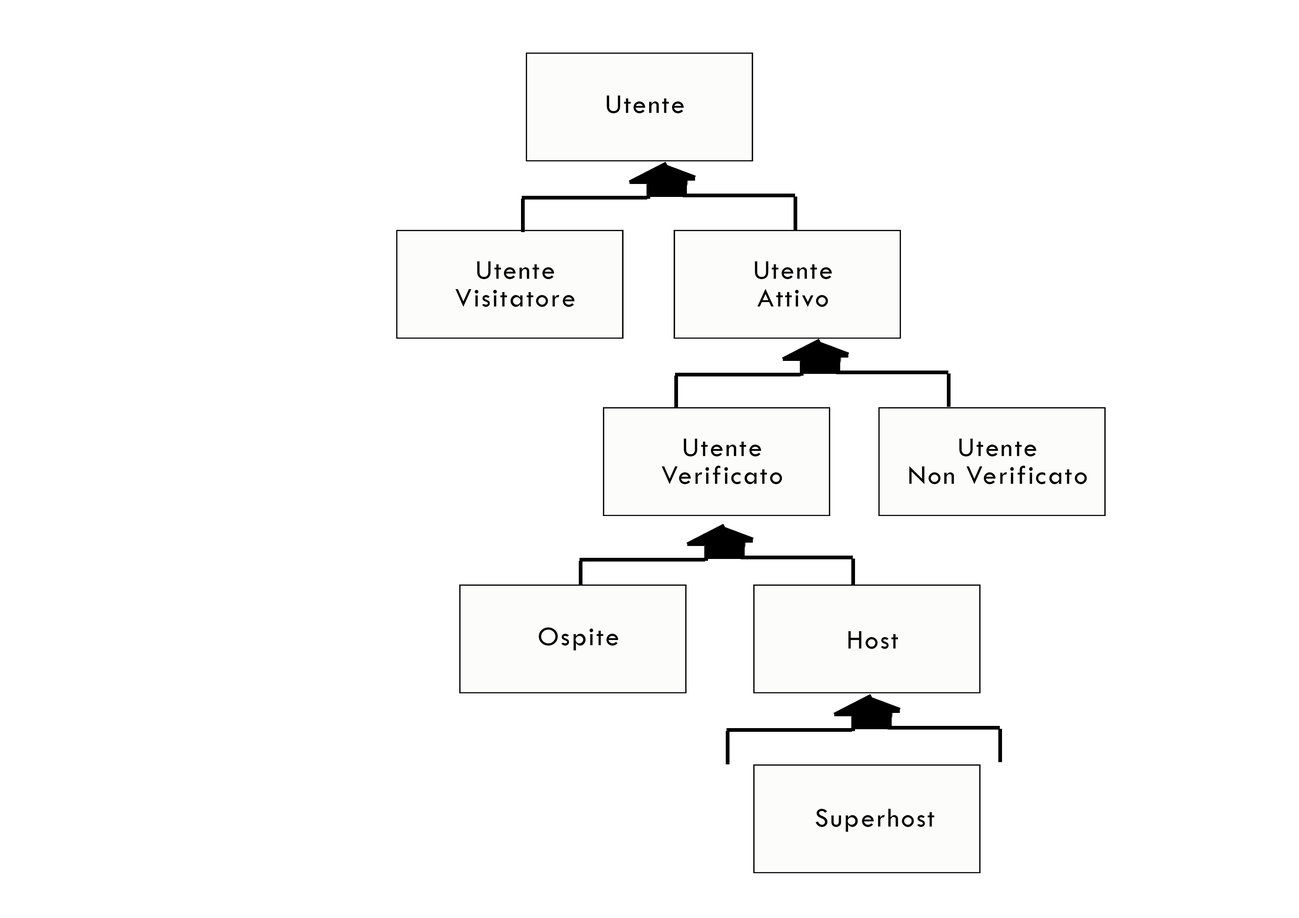
<style>
.page{position:relative;width:1299px;height:918px;background:#ffffff}
.page>*{position:absolute;margin:0}
.t1{font:27.7px "TwCenMT-Regular";letter-spacing:0.06em;color:#040404}
.t2{font:27.7px/27.7px "TwCenMT-Regular";letter-spacing:0.06em;color:#040404}
</style>
<div class="page">
<p class="t1" style="left:606px;top:96px;width:78px;height:17px">Utente</p>
<p class="t2" style="left:455px;top:261px;width:120px;height:46px;text-align:center">Utente<br>Visitatore</p>
<p class="t2" style="left:755px;top:261px;width:77px;height:46px;text-align:center">Utente<br>Attivo</p>
<p class="t2" style="left:662px;top:439px;width:120px;height:45px;text-align:center">Utente<br>Verificato</p>
<p class="t2" style="left:909px;top:439px;width:178px;height:45px;text-align:center">Utente<br>Non Verificato</p>
<p class="t1" style="left:538px;top:628px;width:80px;height:22px">Ospite</p>
<p class="t1" style="left:848px;top:631px;width:50px;height:18px">Host</p>
<p class="t1" style="left:815px;top:809px;width:119px;height:23px">Superhost</p>
</div>
